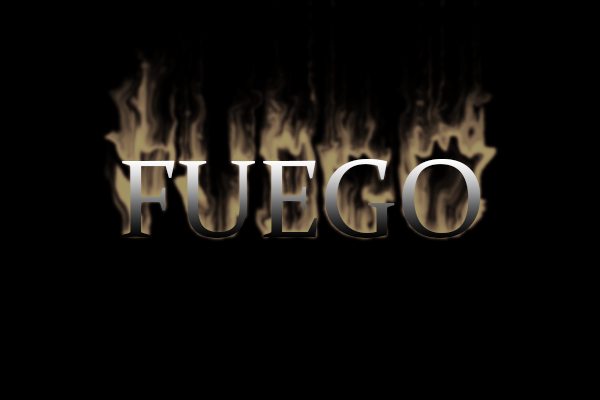
<style>
.page{position:relative;width:600px;height:400px;background:#000000}
.page>*{position:absolute;margin:0}
.t1{font:110px "Constantia"}
</style>
<div class="page">
<p class="t1" style="left:122px;top:159px;width:359px;height:79px">FUEGO</p>
</div>
